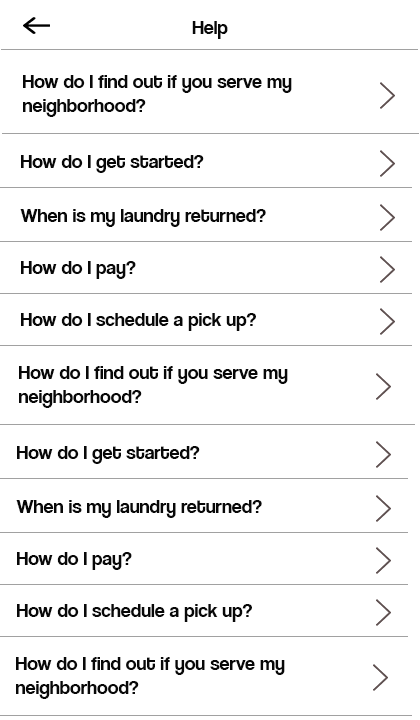
<style>
.page{position:relative;width:420px;height:720px;background:#ffffff}
.page>*{position:absolute;margin:0}
.t1{font:20px "CoolveticaRg-Regular";color:#080808}
</style>
<div class="page">
<p class="t1" style="left:192px;top:21px;width:36px;height:18px">Help</p>
<p class="t1" style="left:23px;top:75px;width:269px;height:42px">How do I find out if you serve my <br>neighborhood?</p>
<p class="t1" style="left:21px;top:155px;width:183px;height:18px">How do I get started?</p>
<p class="t1" style="left:20px;top:209px;width:246px;height:18px">When is my laundry returned?</p>
<p class="t1" style="left:21px;top:261px;width:115px;height:18px">How do I pay?</p>
<p class="t1" style="left:21px;top:313px;width:235px;height:18px">How do I schedule a pick up?</p>
<p class="t1" style="left:19px;top:366px;width:269px;height:42px">How do I find out if you serve my <br>neighborhood?</p>
<p class="t1" style="left:17px;top:446px;width:183px;height:18px">How do I get started?</p>
<p class="t1" style="left:16px;top:500px;width:246px;height:18px">When is my laundry returned?</p>
<p class="t1" style="left:17px;top:552px;width:115px;height:18px">How do I pay?</p>
<p class="t1" style="left:17px;top:604px;width:235px;height:18px">How do I schedule a pick up?</p>
<p class="t1" style="left:16px;top:657px;width:269px;height:42px">How do I find out if you serve my <br>neighborhood?</p>
</div>
